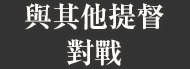
<style>
.page{position:relative;width:190px;height:69px;background:#333333}
.page>*{position:absolute;margin:0}
.t1{font:28px/36px "RyuminPr6N-ExBold";color:#fffdf9}
</style>
<div class="page">
<p class="t1" style="left:25px;top:3px;width:139px;height:63px;text-align:center">與其他提督<br>對戰</p>
</div>
